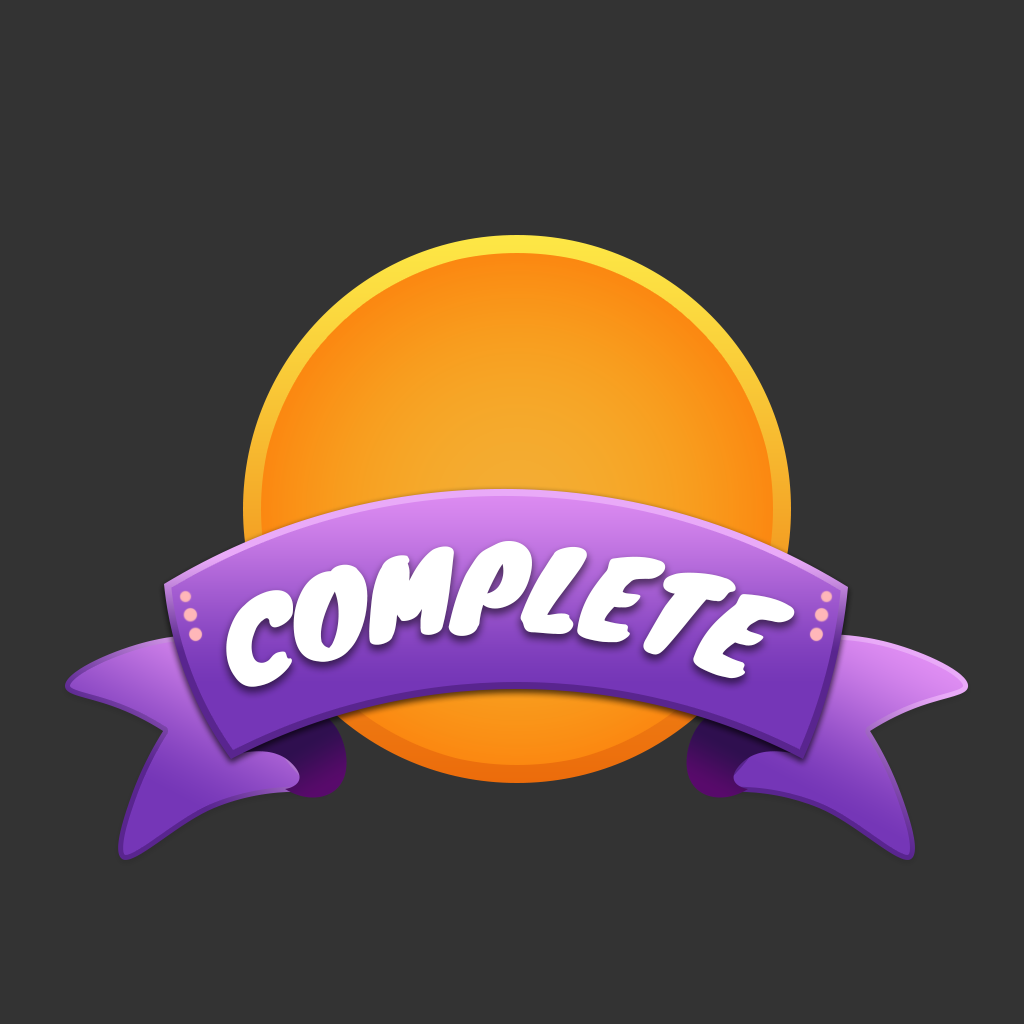
<style>
.page{position:relative;width:1024px;height:1024px;background:#333333}
.page>*{position:absolute;margin:0}
.t1{font:105.1px "Knewave-Regular";color:#ffffff}
</style>
<div class="page">
<p class="t1" style="left:226px;top:541px;width:569px;height:146px;rotate:-1deg">COMPLETE</p>
</div>
